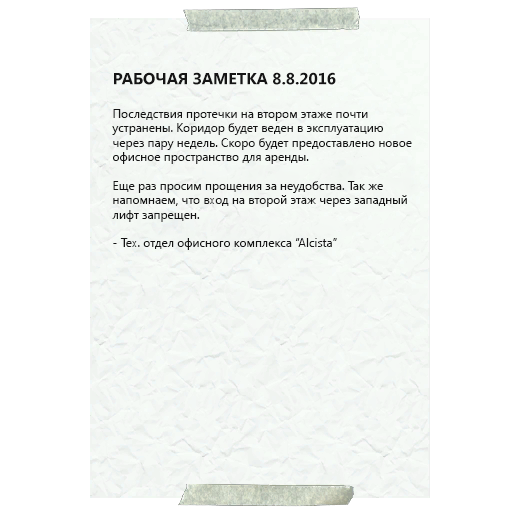
<style>
.page{position:relative;width:512px;height:512px;background:#ffffff}
.page>*{position:absolute;margin:0}
.t1{font:16px "SegoeUI-Bold";color:#151515}
.t2{font:12px "SegoeUI";color:#151515}
</style>
<div class="page">
<p class="t1" style="left:114px;top:72px;width:222px;height:13px">РАБОЧАЯ ЗАМЕТКА 8.8.2016</p>
<p class="t2" style="left:112px;top:109px;width:300px;height:141px">Последствия протечки на втором этаже почти устранены. Коридор будет веден в эксплуатацию через пару недель. Скоро будет предоставлено новое офисное пространство для аренды.<br><br>Еще раз просим прощения за неудобства. Так же напомнаем, что вход на второй этаж через западный лифт запрещен.<br><br>- Тех. отдел офисного комплекса “Alcista”</p>
</div>
